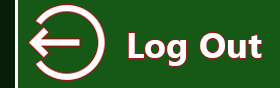
<style>
.page{position:relative;width:280px;height:88px;background:#165816}
.page>*{position:absolute;margin:0}
.t1{font:35.5px "Gadugi-Bold";color:#ffffff}
</style>
<div class="page">
<p class="t1" style="left:128px;top:33px;width:134px;height:33px">Log Out</p>
</div>
